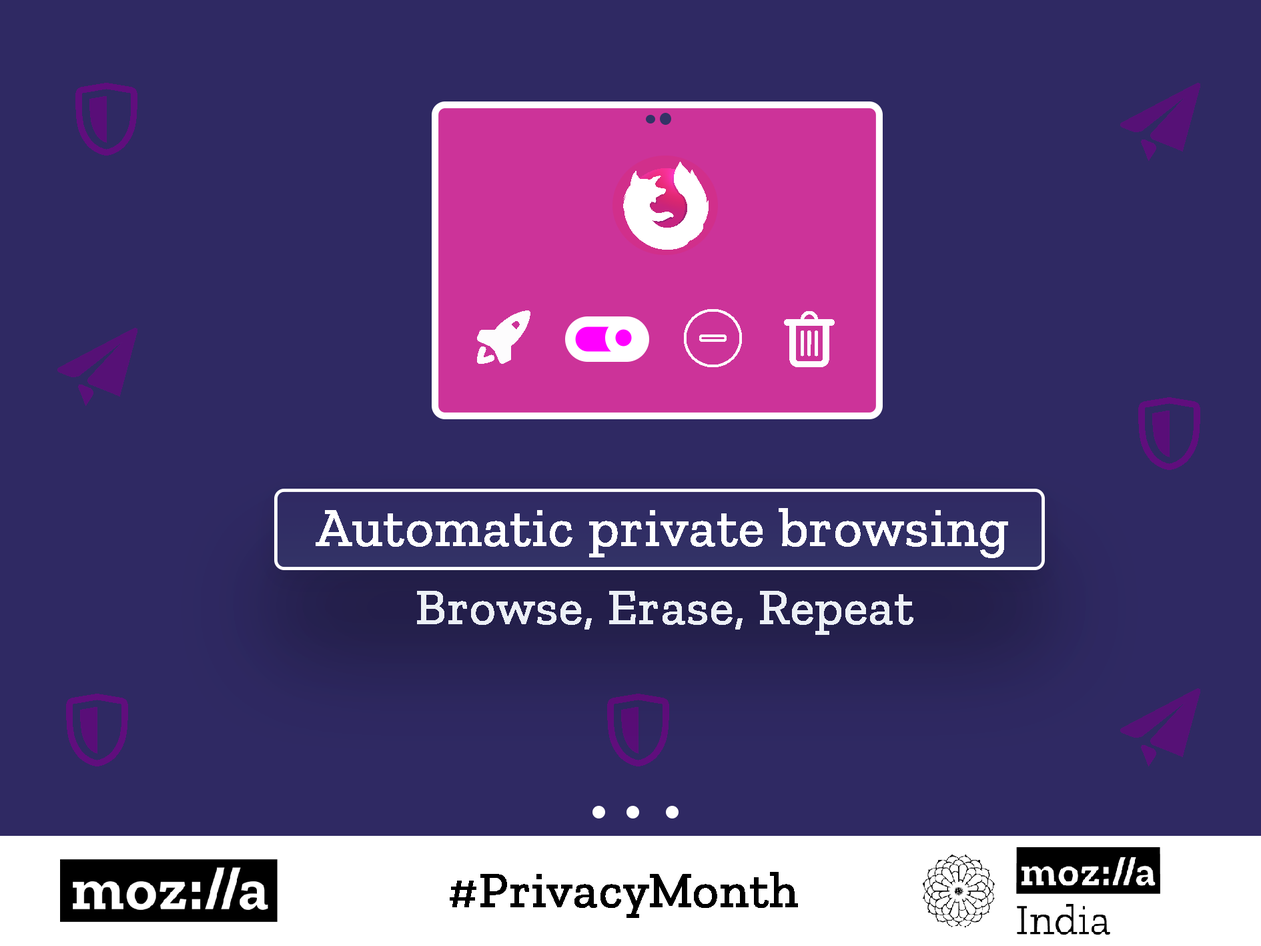
<style>
.page{position:relative;width:1261px;height:946px;background:#2f2963}
.page>*{position:absolute;margin:0}
.t1{font:54.2px "ZillaSlab-Regular";color:#ecf0f6;font-weight:bold}
.t2{font:50px "ZillaSlab-Regular";color:#ecf0f6;font-weight:bold}
.t3{font:50px "ZillaSlab-Regular";color:#000000;font-weight:bold}
</style>
<div class="page">
<p class="t1" style="left:316px;top:508px;width:692px;height:50px">Automatic private browsing</p>
<p class="t2" style="left:417px;top:591px;width:496px;height:44px">Browse, Erase, Repeat</p>
<p class="t3" style="left:450px;top:871px;width:348px;height:46px">#PrivacyMonth</p>
</div>
